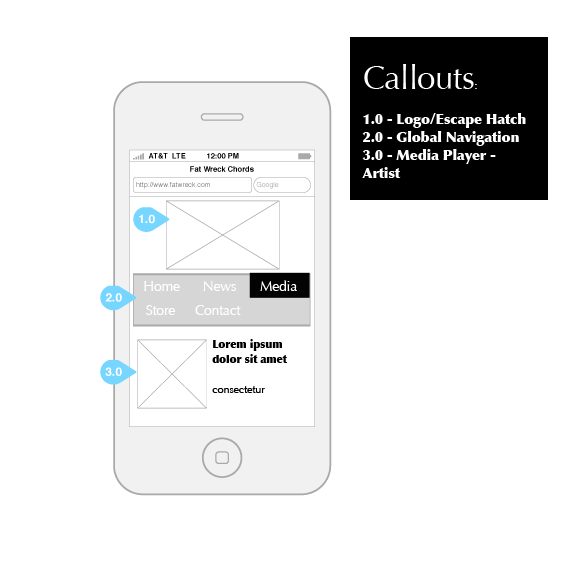
<style>
.page{position:relative;width:576px;height:576px;background:#ffffff}
.page>*{position:absolute;margin:0}
.t1{font:14px/18px "Optima-ExtraBlack";letter-spacing:-0.015em;color:#ffffff}
.t2{font:33px/17px "Optima-Regular";letter-spacing:-0.015em;color:#ffffff}
.t3{font:12px/17px "Optima-Regular";letter-spacing:-0.015em;color:#ffffff}
.t4{font:14px "Optima-Regular";letter-spacing:-0.015em;color:#ffffff}
.t5{font:11px/15px "Optima-ExtraBlack";letter-spacing:-0.015em;color:#000000}
.t6{font:11px/15px "Optima-Regular";letter-spacing:-0.015em;color:#000000}
</style>
<div class="page">
<p class="t1" style="left:362px;top:64px;width:164px;height:114px"><span class="t2">Callouts</span><span class="t3">:<br><br></span>1.0 - Logo/Escape Hatch<br>2.0 - Global Navigation<br>3.0 - Media Player - Artist</p>
<p class="t4" style="left:144px;top:281px;width:36px;height:10px">Home</p>
<p class="t4" style="left:203px;top:281px;width:33px;height:10px">News</p>
<p class="t4" style="left:260px;top:280px;width:37px;height:11px">Media</p>
<p class="t4" style="left:146px;top:305px;width:29px;height:10px">Store</p>
<p class="t4" style="left:195px;top:305px;width:46px;height:10px">Contact</p>
<p class="t5" style="left:212px;top:339px;width:75px;height:54px">Lorem ipsum dolor sit amet<span class="t6"> <br><br>consectetur</span></p>
</div>
